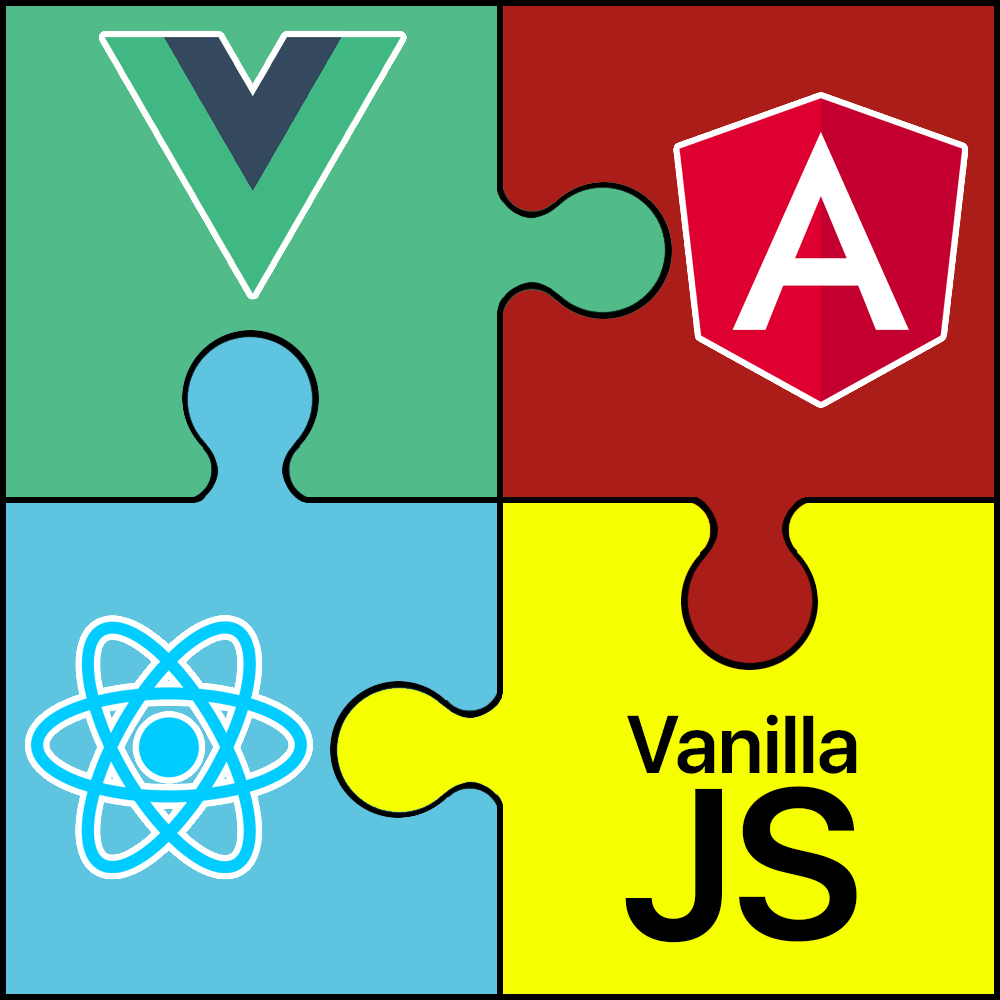
<style>
.page{position:relative;width:1000px;height:1000px;background:#f6ff00}
.page>*{position:absolute;margin:0}
.t1{font:81.2px "SFProDisplay-Semibold";color:#000000}
.t2{font:212.5px "SFProDisplay-Semibold";color:#000000}
</style>
<div class="page">
<p class="t1" style="left:627px;top:714px;width:230px;height:60px">Vanilla</p>
<p class="t2" style="left:625px;top:786px;width:232px;height:157px">JS</p>
</div>
